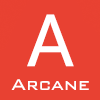
<style>
.page{position:relative;width:100px;height:100px;background:#e84132}
.page>*{position:absolute;margin:0}
.t1{font:68.2px "MicrosoftYaHei";color:#ffffff}
.t2{font:20.4px "712-CAI978";color:#ffffff}
</style>
<div class="page">
<p class="t1" style="left:27px;top:14px;width:47px;height:53px">A</p>
<p class="t2" style="left:11px;top:79px;width:78px;height:11px">Arcane</p>
</div>
